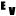
<style>
.page{position:relative;width:16px;height:16px;background:#ffffff}
.page>*{position:absolute;margin:0}
.t1{font:10px "Impact";color:#000000;text-transform:uppercase;scale:1.2 1}
</style>
<div class="page">
<p class="t1" style="left:1px;top:1px;width:5px;height:9px">e</p>
<p class="t1" style="left:8px;top:7px;width:8px;height:8px">v</p>
</div>
